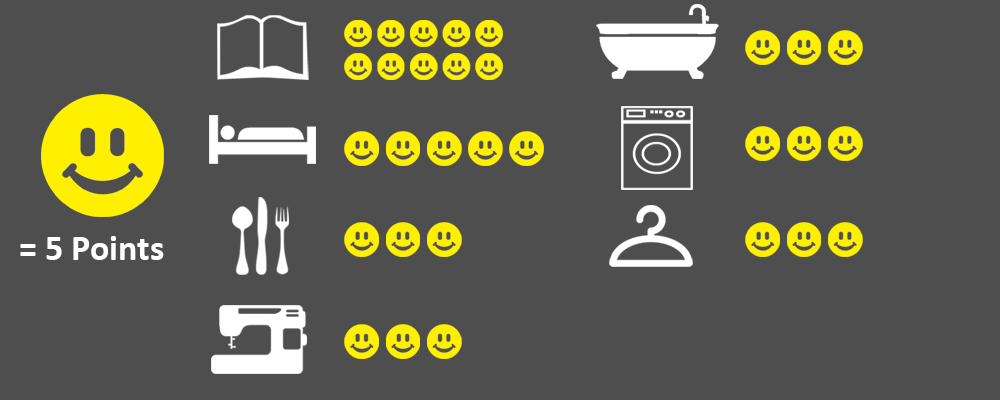
<style>
.page{position:relative;width:1000px;height:400px;background:#4e4e4e}
.page>*{position:absolute;margin:0}
.t1{font:36px "Calibri-Bold";color:#ffffff}
</style>
<div class="page">
<p class="t1" style="left:20px;top:236px;width:144px;height:24px">= 5 Points</p>
</div>
